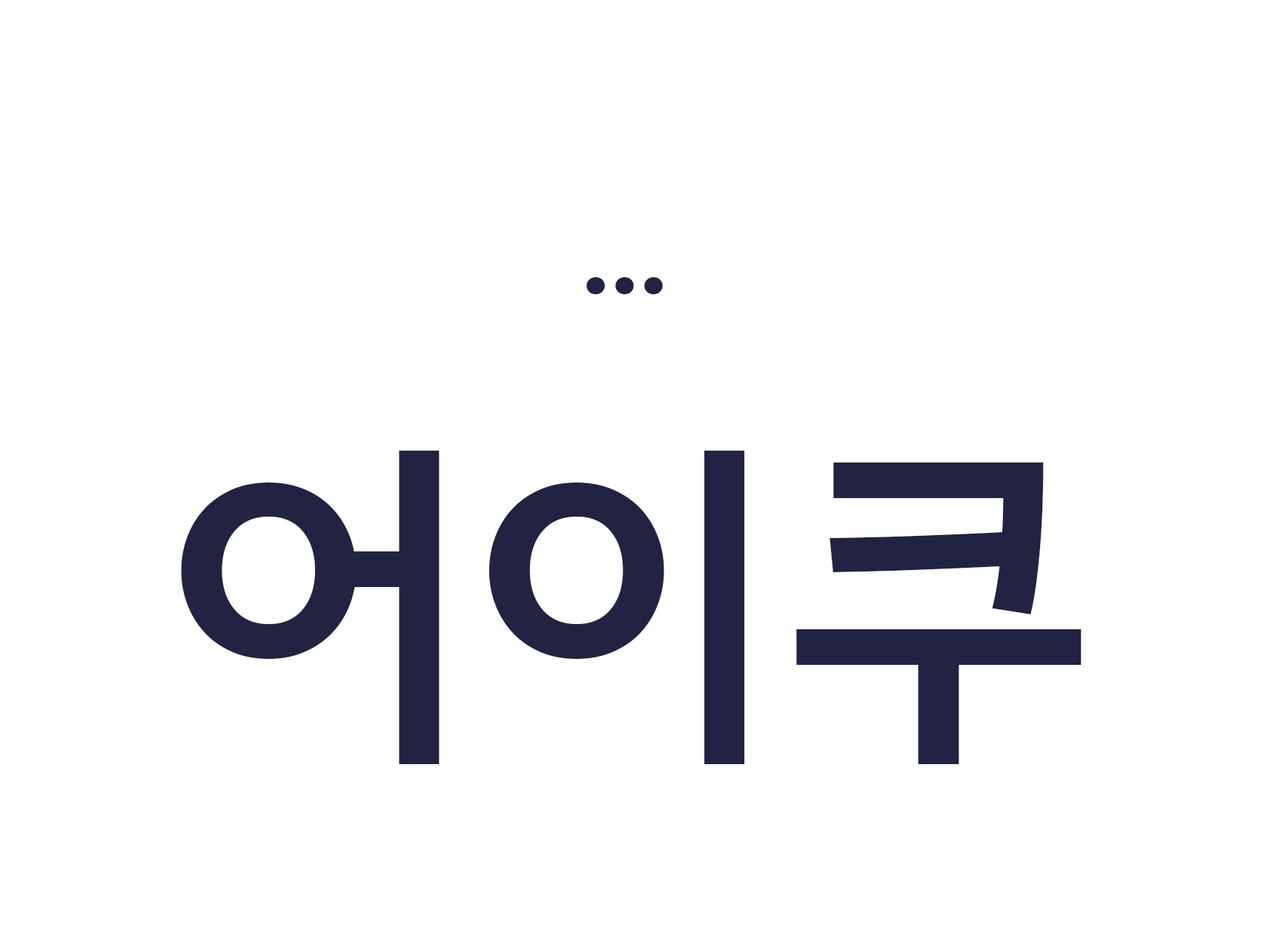
<style>
.page{position:relative;width:1261px;height:945px;background:#ffffff}
.page>*{position:absolute;margin:0}
.t1{font:111.2px "GoyangDeogyangB-Regular";color:#222242}
.t2{font:333.7px "GoyangDeogyangB-Regular";color:#222242}
</style>
<div class="page">
<p class="t1" style="left:587px;top:277px;width:76px;height:17px">...</p>
<p class="t2" style="left:181px;top:451px;width:901px;height:313px">어이쿠</p>
</div>
